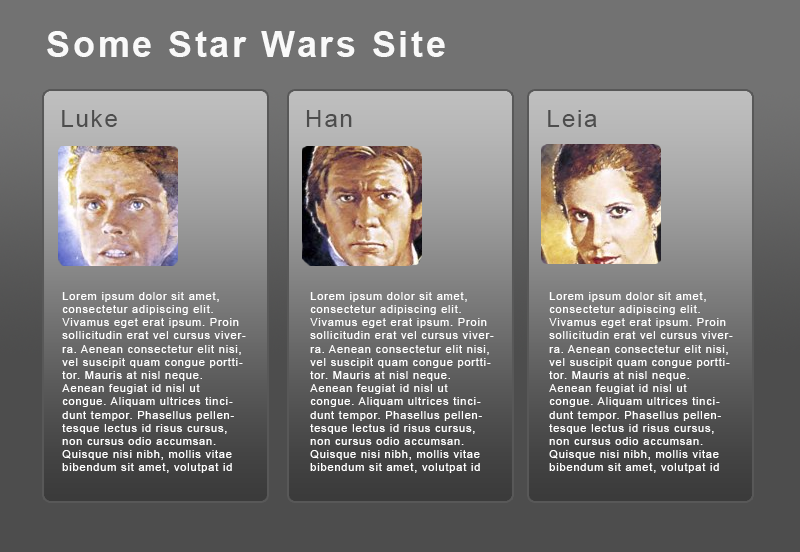
<style>
.page{position:relative;width:800px;height:552px}
.page>*{position:absolute;margin:0}
.t1{font:36px "Arial-BoldMT";letter-spacing:0.075em;color:#f8f8f8}
.t2{font:24px "ArialMT";letter-spacing:0.075em;color:#4d4d4d}
.t3{font:11px "ArialMT";letter-spacing:0.075em;color:#ffffff}
</style>
<div class="page">
<p class="t1" style="left:47px;top:31px;width:398px;height:26px">Some Star Wars Site</p>
<p class="t2" style="left:62px;top:110px;width:55px;height:17px">Luke</p>
<p class="t2" style="left:306px;top:110px;width:46px;height:17px">Han</p>
<p class="t2" style="left:548px;top:110px;width:49px;height:17px">Leia</p>
<p class="t3" style="left:62px;top:292px;width:184px;height:181px">Lorem ipsum dolor sit amet, consectetur adipiscing elit. Vivamus eget erat ipsum. Proin sollicitudin erat vel cursus viverra. Aenean consectetur elit nisi, vel suscipit quam congue porttitor. Mauris at nisl neque. Aenean feugiat id nisl ut congue. Aliquam ultrices tincidunt tempor. Phasellus pellentesque lectus id risus cursus, non cursus odio accumsan. Quisque nisi nibh, mollis vitae bibendum sit amet, volutpat id nisl. Mauris a orci porttitor turpis convallis fringilla. Maecenas urna arcu, malesuada sit amet est ac, scelerisque porta nulla. Quisque quis neque lorem. Donec rutrum vehicula sapien, in ultrices lectus ultricies in.</p>
<p class="t3" style="left:310px;top:292px;width:184px;height:181px">Lorem ipsum dolor sit amet, consectetur adipiscing elit. Vivamus eget erat ipsum. Proin sollicitudin erat vel cursus viverra. Aenean consectetur elit nisi, vel suscipit quam congue porttitor. Mauris at nisl neque. Aenean feugiat id nisl ut congue. Aliquam ultrices tincidunt tempor. Phasellus pellentesque lectus id risus cursus, non cursus odio accumsan. Quisque nisi nibh, mollis vitae bibendum sit amet, volutpat id nisl. Mauris a orci porttitor turpis convallis fringilla. Maecenas urna arcu, malesuada sit amet est ac, scelerisque porta nulla. Quisque quis neque lorem. Donec rutrum vehicula sapien, in ultrices lectus ultricies in.</p>
<p class="t3" style="left:549px;top:292px;width:184px;height:181px">Lorem ipsum dolor sit amet, consectetur adipiscing elit. Vivamus eget erat ipsum. Proin sollicitudin erat vel cursus viverra. Aenean consectetur elit nisi, vel suscipit quam congue porttitor. Mauris at nisl neque. Aenean feugiat id nisl ut congue. Aliquam ultrices tincidunt tempor. Phasellus pellentesque lectus id risus cursus, non cursus odio accumsan. Quisque nisi nibh, mollis vitae bibendum sit amet, volutpat id nisl. Mauris a orci porttitor turpis convallis fringilla. Maecenas urna arcu, malesuada sit amet est ac, scelerisque porta nulla. Quisque quis neque lorem. Donec rutrum vehicula sapien, in ultrices lectus ultricies in.</p>
</div>
